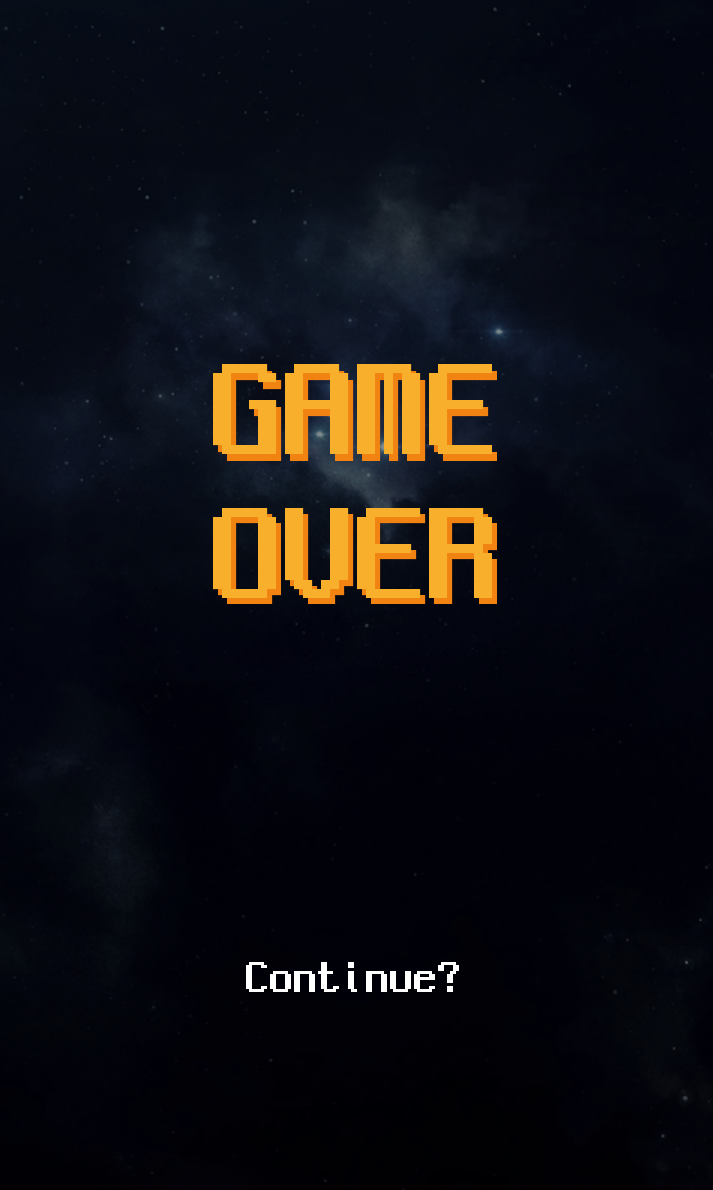
<style>
.page{position:relative;width:713px;height:1190px}
.page>*{position:absolute;margin:0}
.t1{font:144px "NeoDunggeunmo-Regular";color:#f8af2c}
.t2{font:144px "NeoDunggeunmo-Regular"}
.t3{font:48px "NeoDunggeunmo-Regular";color:#ffffff}
</style>
<div class="page">
<p class="t1" style="left:213px;top:364px;width:279px;height:90px">GAME</p>
<p class="t2" style="left:218px;top:371px;width:279px;height:90px">GAME</p>
<p class="t1" style="left:213px;top:508px;width:279px;height:90px">OVER</p>
<p class="t2" style="left:218px;top:514px;width:279px;height:90px">OVER</p>
<p class="t3" style="left:246px;top:962px;width:213px;height:30px">Continue?</p>
</div>
